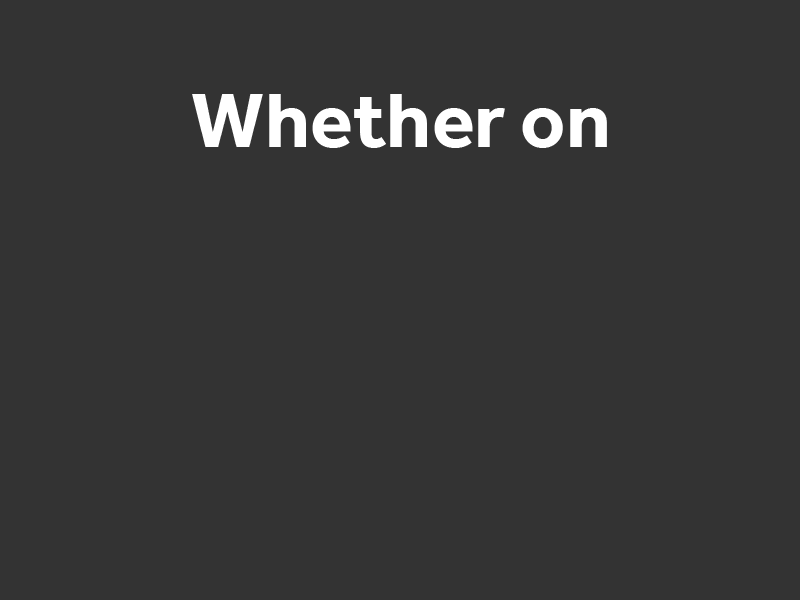
<style>
.page{position:relative;width:800px;height:600px;background:#333333}
.page>*{position:absolute;margin:0}
.t1{font:80.2px "Effra-Bold";color:#ffffff}
</style>
<div class="page">
<p class="t1" style="left:192px;top:94px;width:415px;height:54px">Whether on</p>
</div>
